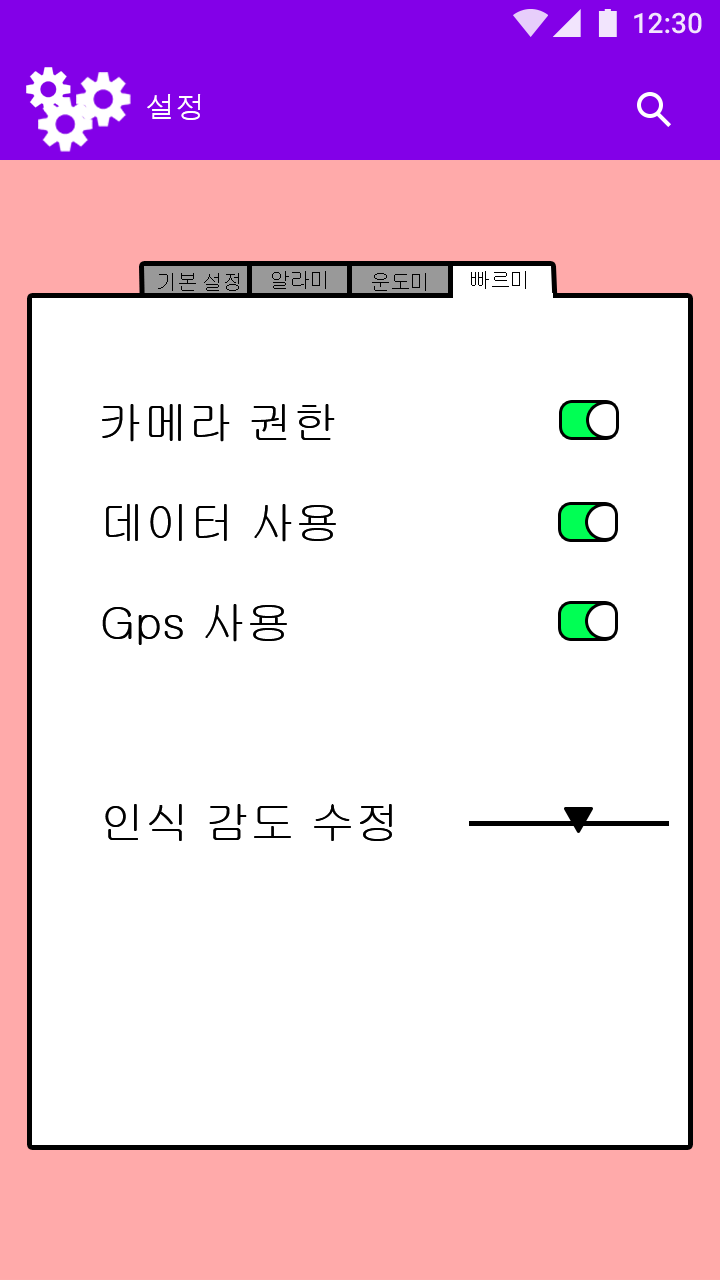
<style>
.page{position:relative;width:720px;height:1280px;background:#ffffff}
.page>*{position:absolute;margin:0}
.t1{font:30px "Dotum";color:#ffffff}
.t2{font:20px "Gulim";color:#000000}
.t3{font:45px "Gulim";color:#000000}
</style>
<div class="page">
<p class="t1" style="left:147px;top:94px;width:54px;height:26px">설정</p>
<p class="t2" style="left:158px;top:273px;width:81px;height:18px">기본 설정</p>
<p class="t2" style="left:272px;top:271px;width:54px;height:18px">알라미</p>
<p class="t2" style="left:372px;top:273px;width:54px;height:18px">운도미</p>
<p class="t2" style="left:471px;top:271px;width:55px;height:18px">빠르미</p>
<p class="t3" style="left:102px;top:404px;width:233px;height:38px">카메라 권한</p>
<p class="t3" style="left:106px;top:504px;width:230px;height:38px">데이터 사용</p>
<p class="t3" style="left:102px;top:604px;width:185px;height:41px">Gps 사용</p>
<p class="t3" style="left:105px;top:804px;width:287px;height:37px">인식 감도 수정</p>
</div>
